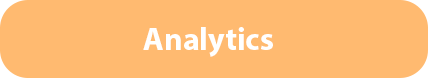
<style>
.page{position:relative;width:428px;height:78px;background:#ffba70}
.page>*{position:absolute;margin:0}
.t1{font:32px "MyriadPro-Bold";color:#ffffff}
</style>
<div class="page">
<p class="t1" style="left:143px;top:27px;width:130px;height:30px">Analytics</p>
</div>
